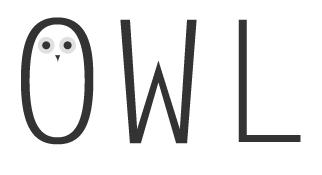
<style>
.page{position:relative;width:322px;height:175px;background:#ffffff}
.page>*{position:absolute;margin:0}
.t1{font:169.9px "LetterGothicStd";color:#333333}
</style>
<div class="page">
<p class="t1" style="left:21px;top:17px;width:280px;height:128px">OWL</p>
</div>
